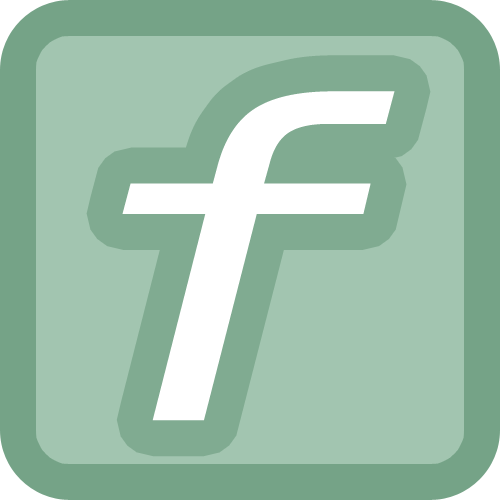
<style>
.page{position:relative;width:500px;height:500px;background:#a2c5b0}
.page>*{position:absolute;margin:0}
.t1{font:432.6px "Menlo-Italic";color:#ffffff;scale:1.31 1}
</style>
<div class="page">
<p class="t1" style="left:122px;top:91px;width:273px;height:330px">f</p>
</div>
